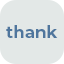
<style>
.page{position:relative;width:64px;height:64px;background:#e3e8e7}
.page>*{position:absolute;margin:0}
.t1{font:16.6px "Montserrat-Bold";color:#4f769d}
</style>
<div class="page">
<p class="t1" style="left:6px;top:25px;width:52px;height:13px">thank</p>
</div>
